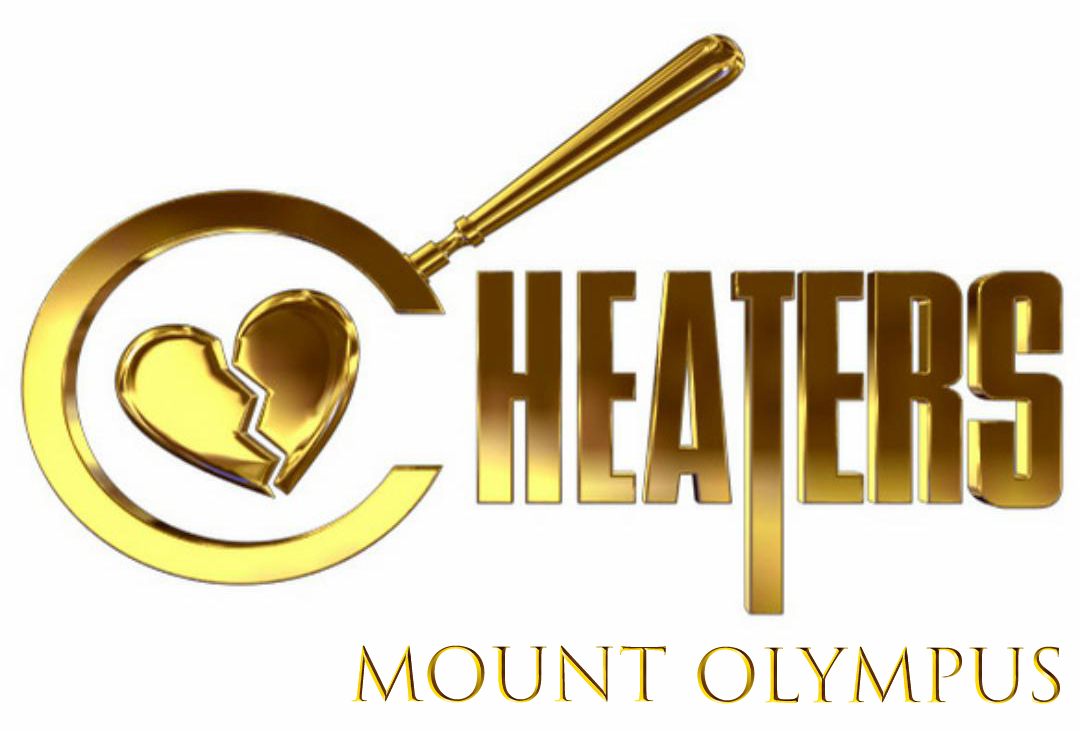
<style>
.page{position:relative;width:1080px;height:733px;background:#fefefe}
.page>*{position:absolute;margin:0}
.t1{font:72px "TrajanColor-Concept";text-transform:uppercase}
</style>
<div class="page">
<p class="t1" style="left:351px;top:645px;width:315px;height:58px">Mount</p>
<p class="t1" style="left:697px;top:646px;width:363px;height:58px">Olympus</p>
</div>
